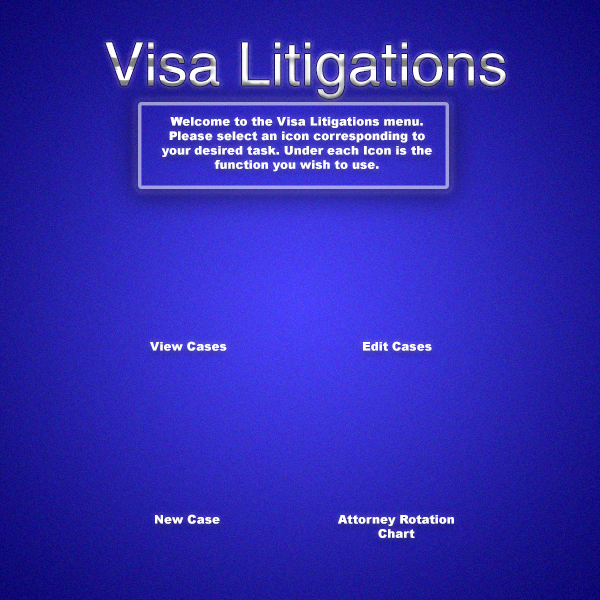
<style>
.page{position:relative;width:600px;height:600px}
.page>*{position:absolute;margin:0}
.t1{font:60px "Helvetica"}
.t2{font:12px "Arial-Black";color:#fbf8f8}
</style>
<div class="page">
<p class="t1" style="left:105px;top:42px;width:401px;height:57px">Visa Litigations</p>
<p class="t2" style="left:161px;top:117px;width:271px;height:55px;text-align:center">Welcome to the Visa Litigations menu. Please select an icon corresponding to your desired task. Under each Icon is the function you wish to use.<br>Enjoy!</p>
<p class="t2" style="left:150px;top:341px;width:304px;height:197px">View Cases                     Edit Cases<br><br><br><br><br><br><br><br><br><br><br><br>   New Case       Attorney Rotation<br>             Chart</p>
</div>
